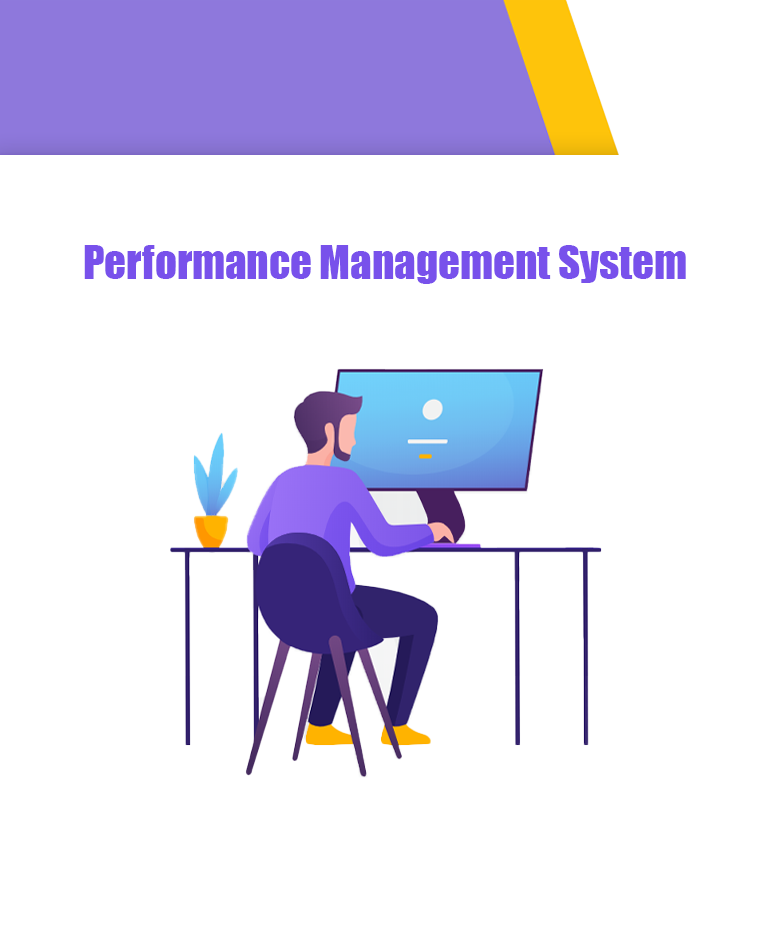
<style>
.page{position:relative;width:770px;height:927px;background:#ffffff}
.page>*{position:absolute;margin:0}
.t1{font:42.8px "Impact";color:#7851eb}
</style>
<div class="page">
<p class="t1" style="left:84px;top:245px;width:602px;height:39px">Performance Management System</p>
</div>
